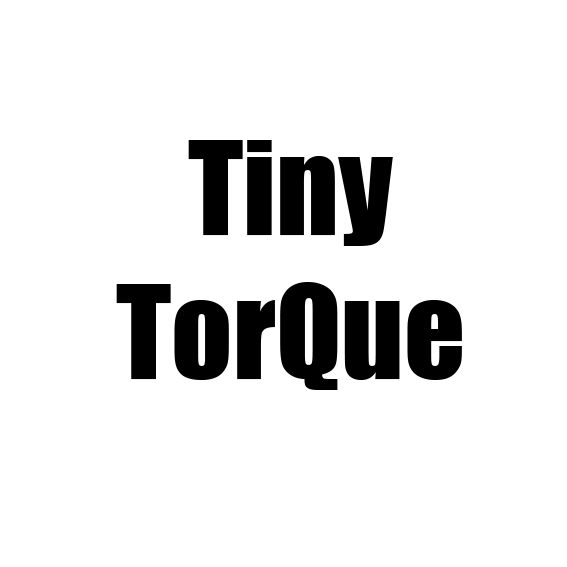
<style>
.page{position:relative;width:567px;height:567px;background:#ffffff}
.page>*{position:absolute;margin:0}
.t1{font:120px "Impact";color:#010101}
</style>
<div class="page">
<p class="t1" style="left:116px;top:140px;width:346px;height:250px;text-align:center">Tiny<br>TorQue</p>
</div>
